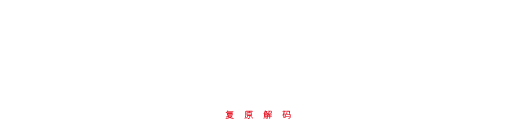
<style>
.page{position:relative;width:512px;height:128px;background:#ffffff}
.page>*{position:absolute;margin:0}
.t1{font:9px "JiangChengYuanTi-300W"}
</style>
<div class="page">
<p class="t1" style="left:225px;top:110px;width:66px;height:9px">复     原     解     码</p>
</div>
